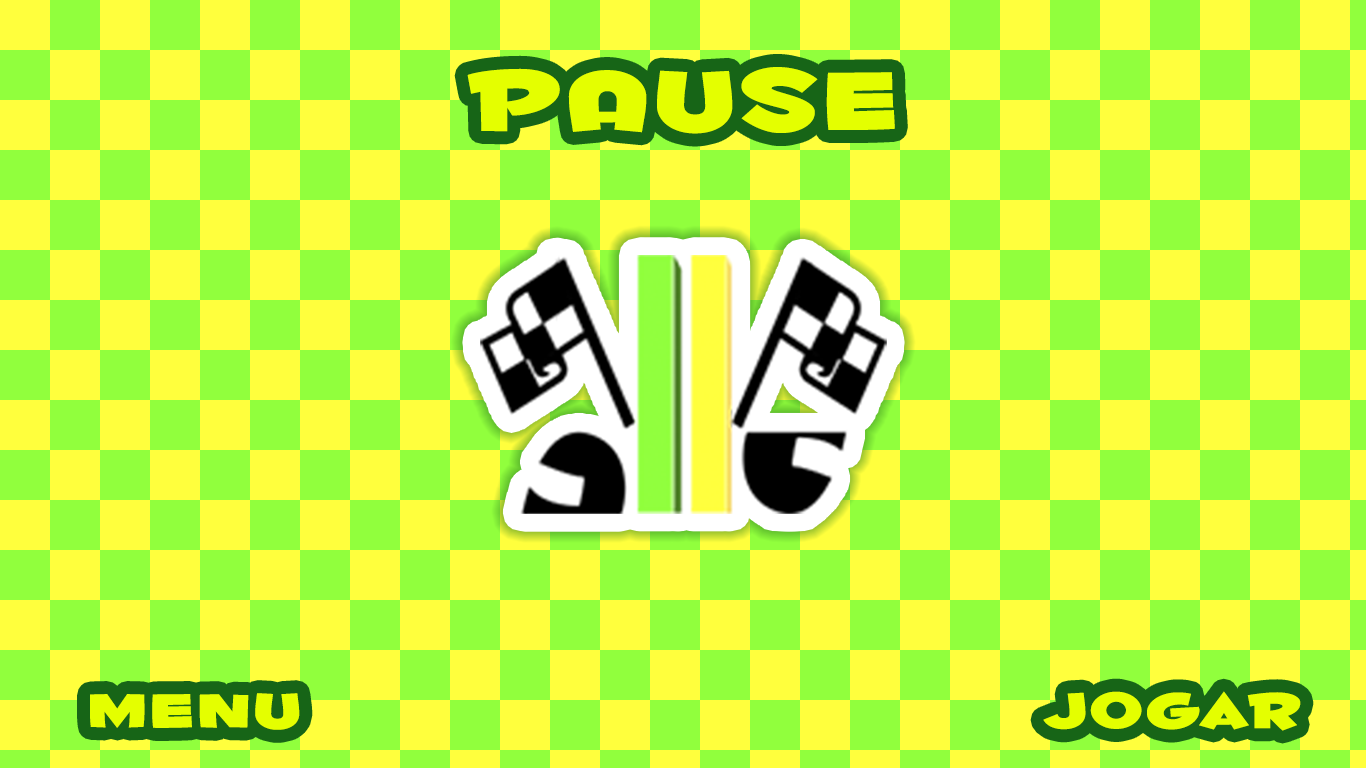
<style>
.page{position:relative;width:1366px;height:768px;background:#ffff3d}
.page>*{position:absolute;margin:0}
.t1{font:100px "FontdinerdotcomHuggable";letter-spacing:0.04em;color:#e4ff00;scale:1.43 1}
.t2{font:58.3px "FontdinerdotcomHuggable";letter-spacing:0.04em;color:#e4ff00;scale:1.43 1}
</style>
<div class="page">
<p class="t1" style="left:467px;top:67px;width:428px;height:67px">PAUSE</p>
<p class="t2" style="left:90px;top:693px;width:210px;height:37px">MENU</p>
<p class="t2" style="left:1043px;top:691px;width:258px;height:40px">jogar</p>
</div>
